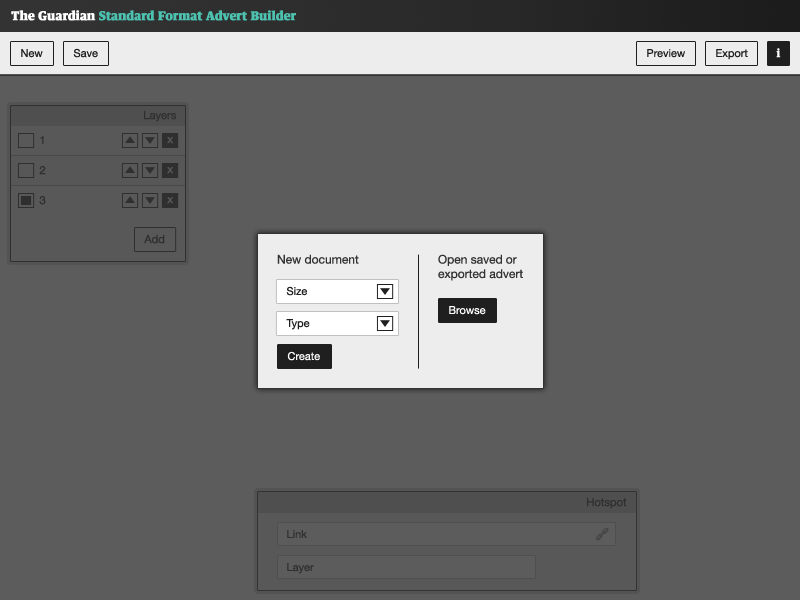
<style>
.page{position:relative;width:800px;height:600px;background:#5c5c5c}
.page>*{position:absolute;margin:0}
.t1{font:12px "GuardianTitlepiece-RegularAutohint";color:#4ec2b0;font-weight:bold}
.t2{font:12px "GuardianTitlepiece-RegularAutohint";color:#ffffff;font-weight:bold}
.t3{font:11px "HelveticaNeue";color:#201f1f}
.t4{font:11px "GuardianTitlepiece-RegularAutohint";color:#ffffff;font-weight:bold}
.t5{font:11px "HelveticaNeue-Light";color:#201f1f;font-weight:bold}
.t6{font:11px "HelveticaNeue-Light";color:#585858;font-weight:bold}
.t7{font:12px "HelveticaNeue";color:#333333}
.t8{font:11px "HelveticaNeue";color:#ffffff}
.t9{font:11px "HelveticaNeue-Light";color:#20201f;font-weight:bold}
</style>
<div class="page">
<p class="t1" style="left:11px;top:10px;width:285px;height:11px"><span class="t2">The Guardian </span>Standard Format Advert Builder</p>
<p class="t3" style="left:21px;top:49px;width:22px;height:9px">New</p>
<p class="t3" style="left:73px;top:48px;width:25px;height:10px">Save</p>
<p class="t3" style="left:647px;top:49px;width:38px;height:9px">Preview</p>
<p class="t3" style="left:716px;top:49px;width:32px;height:11px">Export</p>
<p class="t4" style="left:776px;top:48px;width:5px;height:10px">i</p>
<p class="t5" style="left:144px;top:110px;width:32px;height:12px">Layers</p>
<p class="t5" style="left:40px;top:136px;width:4px;height:9px">1</p>
<p class="t6" style="left:167px;top:137px;width:6px;height:7px">x</p>
<p class="t5" style="left:39px;top:166px;width:7px;height:9px">2</p>
<p class="t6" style="left:167px;top:167px;width:6px;height:7px">x</p>
<p class="t5" style="left:39px;top:196px;width:7px;height:9px">3</p>
<p class="t6" style="left:167px;top:197px;width:6px;height:7px">x</p>
<p class="t5" style="left:144px;top:234px;width:21px;height:10px">Add</p>
<p class="t7" style="left:277px;top:254px;width:82px;height:10px">New document</p>
<p class="t7" style="left:438px;top:254px;width:85px;height:27px">Open saved or exported advert</p>
<p class="t3" style="left:286px;top:286px;width:21px;height:10px">Size</p>
<p class="t8" style="left:449px;top:306px;width:37px;height:9px">Browse</p>
<p class="t3" style="left:286px;top:319px;width:24px;height:11px">Type</p>
<p class="t8" style="left:287px;top:351px;width:33px;height:10px">Create</p>
<p class="t9" style="left:587px;top:497px;width:40px;height:12px">Hotspot</p>
<p class="t3" style="left:287px;top:530px;width:20px;height:8px">Link</p>
<p class="t3" style="left:287px;top:563px;width:27px;height:11px">Layer</p>
</div>
